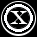
<style>
.page{position:relative;width:37px;height:37px;background:#000000}
.page>*{position:absolute;margin:0}
.t1{font:18.5px "EngraversMT";letter-spacing:-0.075em;color:#ffffff;text-transform:uppercase;scale:0.9 1}
</style>
<div class="page">
<p class="t1" style="left:10px;top:11px;width:17px;height:13px">X</p>
</div>
